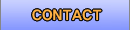
<style>
.page{position:relative;width:130px;height:30px}
.page>*{position:absolute;margin:0}
.t1{font:14px "YDIYGO360";color:#ffb245}
</style>
<div class="page">
<p class="t1" style="left:32px;top:9px;width:70px;height:12px">CONTACT</p>
<p class="t1" style="left:32px;top:9px;width:70px;height:12px">CONTACT</p>
</div>
